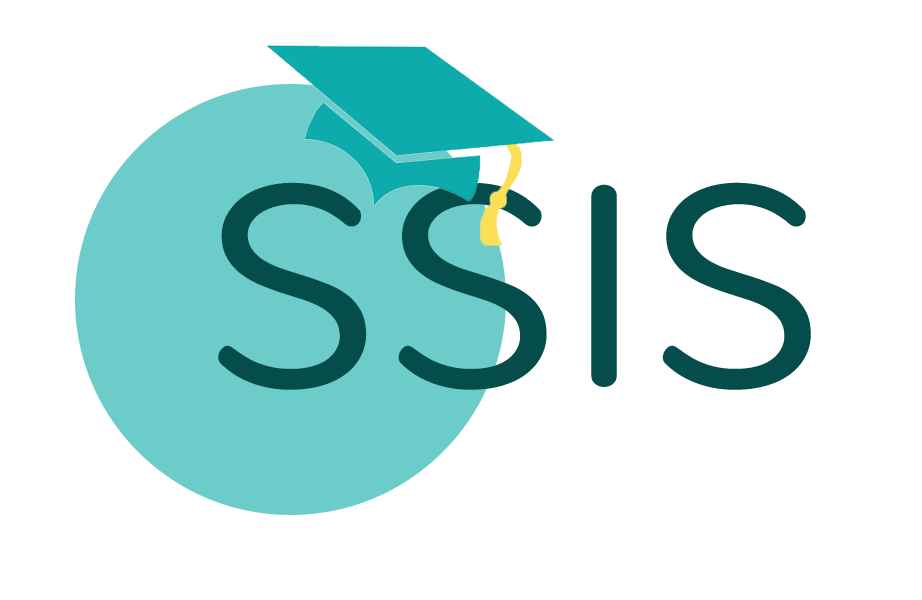
<style>
.page{position:relative;width:922px;height:600px;background:#ffffff}
.page>*{position:absolute;margin:0}
.t1{font:290px "Nunito-Light";color:#054d4b}
</style>
<div class="page">
<p class="t1" style="left:218px;top:182px;width:593px;height:208px">SSIS</p>
</div>
